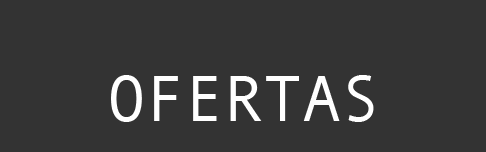
<style>
.page{position:relative;width:486px;height:152px;background:#333333}
.page>*{position:absolute;margin:0}
.t1{font:65px "AndaleMono";color:#ffffff}
</style>
<div class="page">
<p class="t1" style="left:111px;top:75px;width:263px;height:47px">OFERTAS</p>
</div>
